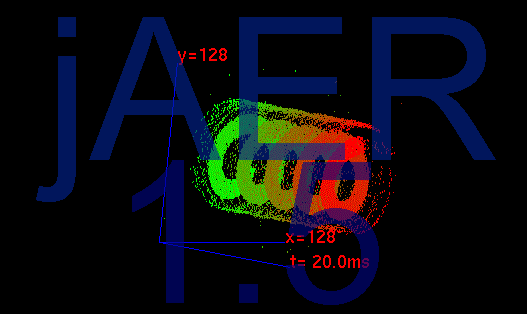
<style>
.page{position:relative;width:527px;height:314px;background:#000000}
.page>*{position:absolute;margin:0}
.t1{font:200px "ArialMT";color:#01165c}
.t2{font:200px "ArialMT";color:#000451}
</style>
<div class="page">
<p class="t1" style="left:36px;top:17px;width:460px;height:185px">jAER</p>
<p class="t2" style="left:132px;top:160px;width:247px;height:145px">1.5</p>
</div>
